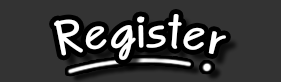
<style>
.page{position:relative;width:281px;height:82px;background:#333333}
.page>*{position:absolute;margin:0}
.t1{font:60px "WRTishKid";color:#ffffff}
</style>
<div class="page">
<p class="t1" style="left:54px;top:14px;width:172px;height:46px">Register</p>
</div>
